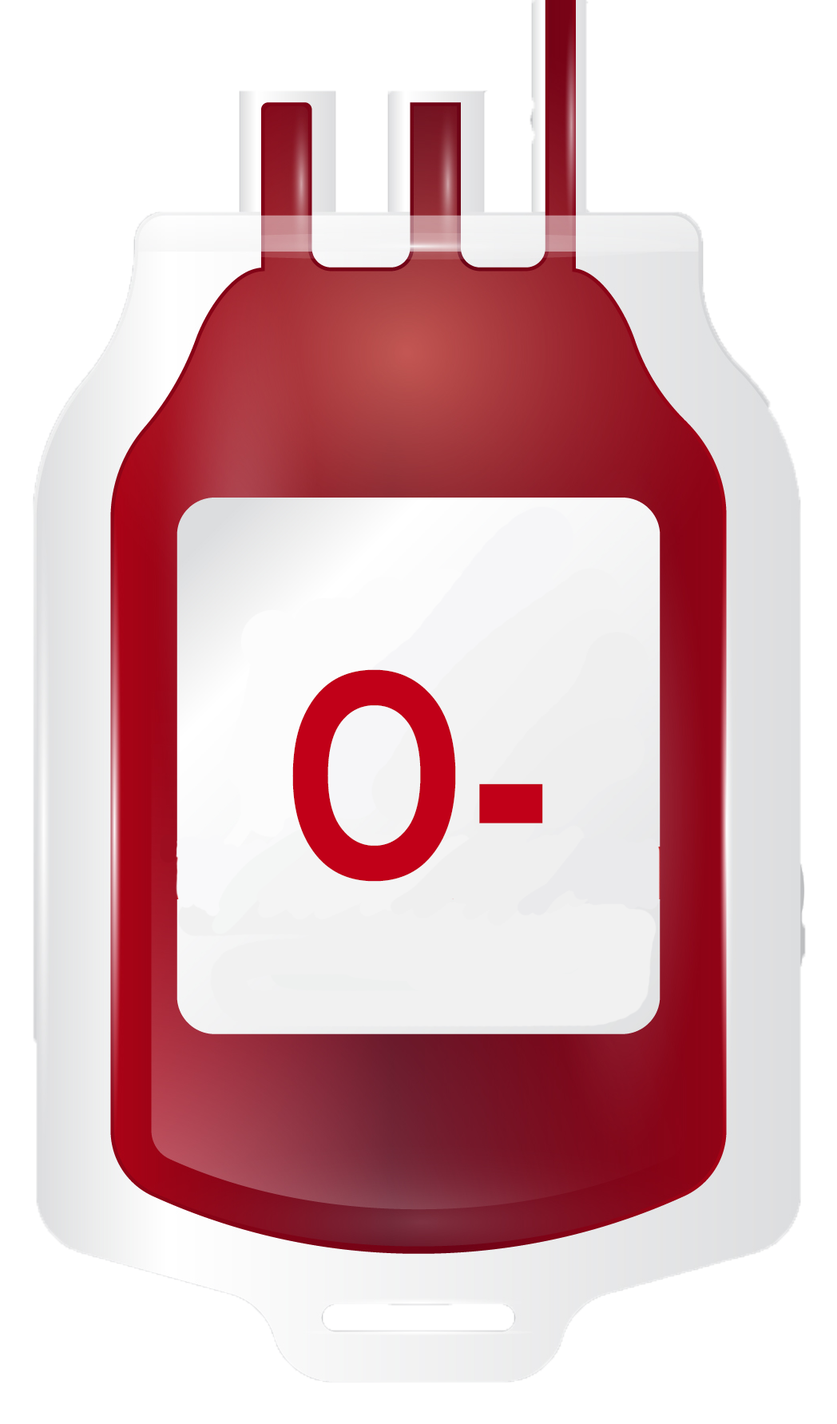
<style>
.page{position:relative;width:837px;height:1424px;background:#ffffff}
.page>*{position:absolute;margin:0}
.t1{font:285.7px "ArialNarrow-Bold";letter-spacing:0.025em;color:#c10018}
</style>
<div class="page">
<p class="t1" style="left:292px;top:669px;width:251px;height:213px">O-</p>
</div>
